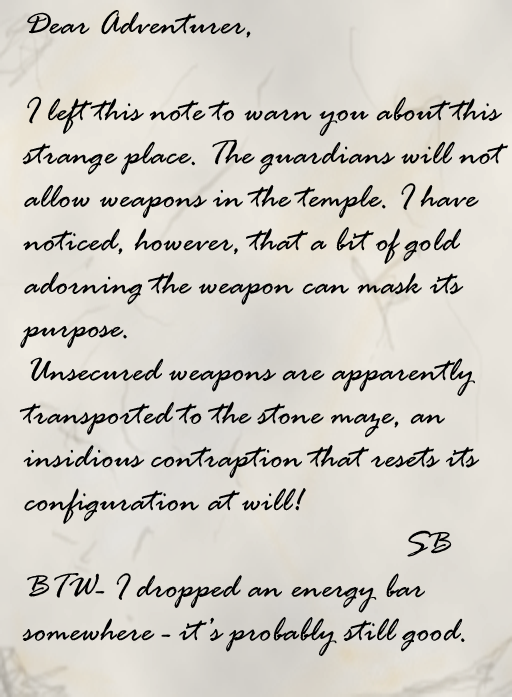
<style>
.page{position:relative;width:512px;height:700px}
.page>*{position:absolute;margin:0}
.t1{font:36.1px "RageItalic";color:#000000}
</style>
<div class="page">
<p class="t1" style="left:19px;top:10px;width:489px;height:646px">Dear Adventurer,<br><br>I left this note to warn you about this <br>strange place. The guardians will not <br>allow weapons in the temple. I have <br>noticed, however, that a bit of gold <br>adorning the weapon can mask its <br>purpose. <br>Unsecured weapons are apparently <br>transported to the stone maze, an <br>insidious contraption that resets its <br>configuration at will! <br>                                          SB<br>BTW- I dropped an energy bar<br>somewhere - it’s probably still good.</p>
</div>
